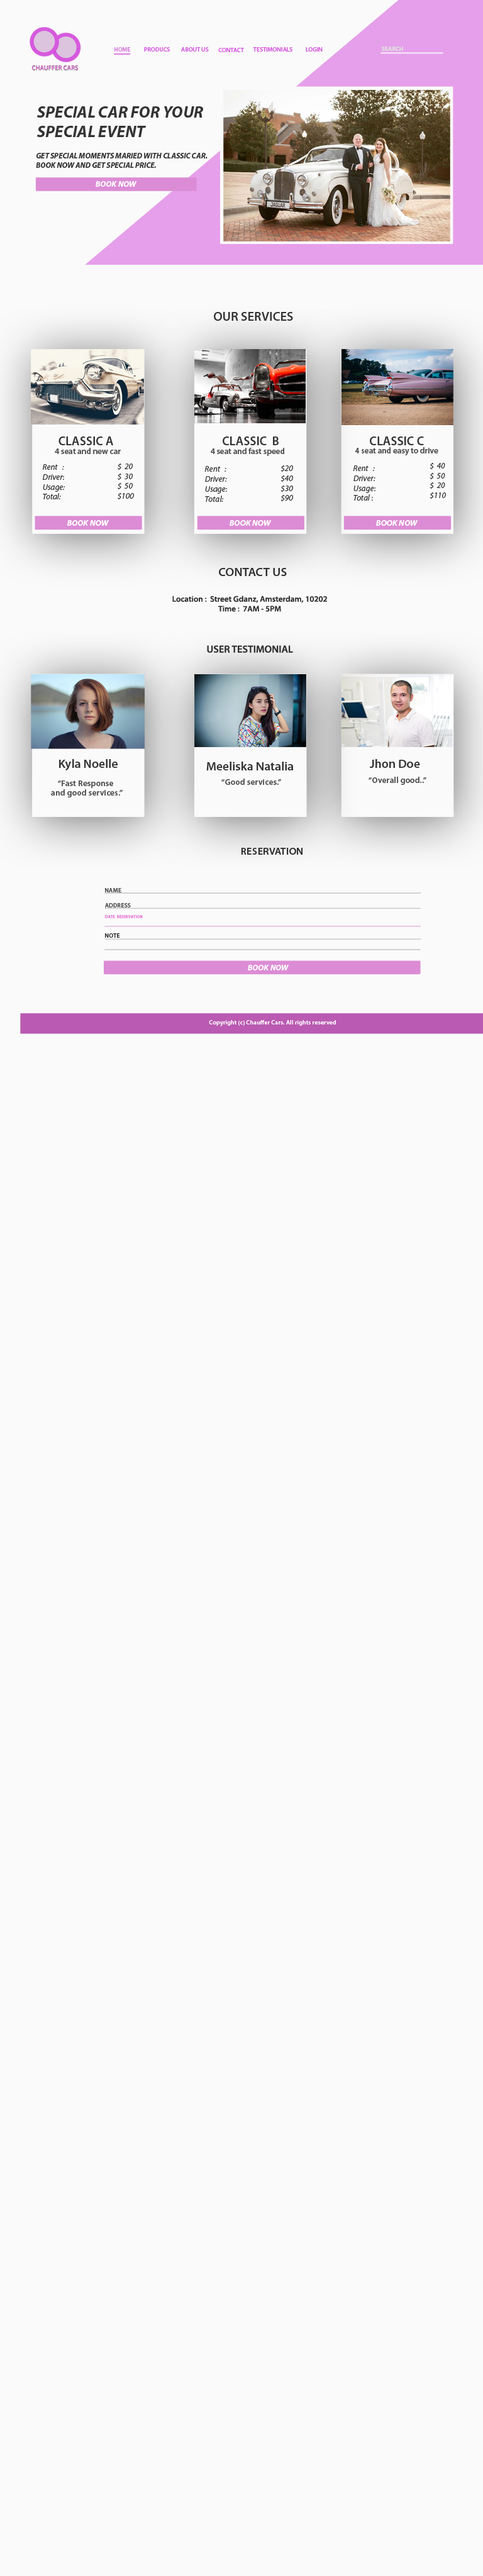
<style>
.page{position:relative;width:483px;height:2576px;background:#fafafa}
.page>*{position:absolute;margin:0}
.t1{font:6.1px "MyriadPro-Semibold";color:#d87cde}
.t2{font:6.1px "MyriadPro-Semibold";color:#d65ade}
.t3{font:6.1px "MyriadPro-Bold";color:#dedede}
.t4{font:16.4px "MyriadPro-BoldIt";color:#333333}
.t5{font:8.2px "MyriadPro-BoldIt";color:#333333;scale:0.94 1}
.t6{font:8.2px "MyriadPro-BoldIt";color:#ffffff}
.t7{font:12.8px "MyriadPro-Semibold";color:#333333}
.t8{font:12.4px "MyriadPro-Semibold";color:#333333}
.t9{font:8.3px "MyriadPro-Semibold";color:#515151}
.t10{font:8.3px "MyriadPro-It";color:#313131}
.t11{font:8.3px "MyriadPro-BoldIt";color:#ffffff}
.t12{font:12.2px "MyriadPro-Semibold";color:#313131}
.t13{font:8.1px "MyriadPro-Semibold";color:#313131}
.t14{font:10.2px "MyriadPro-Semibold";color:#313131}
.t15{font:12.2px "MyriadPro-Semibold";color:#333333}
.t16{font:8.1px "MyriadPro-Semibold";letter-spacing:0.02em;color:#515151}
.t17{font:10.2px "MyriadPro-Semibold";letter-spacing:0.02em;color:#313131}
.t18{font:6.1px "MyriadPro-Semibold";letter-spacing:0.02em;color:#4b4b4b}
.t19{font:4.1px "MyriadPro-Semibold";letter-spacing:0.02em;color:#e67cd6}
.t20{font:6.1px "MyriadPro-Semibold";letter-spacing:0.02em;color:#313131}
.t21{font:8.1px "MyriadPro-BoldIt";color:#ffffff}
.t22{font:6.1px "MyriadPro-Semibold";letter-spacing:0.02em;color:#fcfcfc}
</style>
<div class="page">
<p class="t1" style="left:114px;top:47px;width:17px;height:5px">HOME</p>
<p class="t2" style="left:144px;top:47px;width:26px;height:5px">PRODUCS</p>
<p class="t2" style="left:181px;top:47px;width:28px;height:5px">ABOUT US</p>
<p class="t2" style="left:218px;top:48px;width:26px;height:4px">CONTACT</p>
<p class="t2" style="left:253px;top:47px;width:39px;height:5px">TESTIMONIALS</p>
<p class="t2" style="left:306px;top:47px;width:17px;height:5px">LOGIN</p>
<p class="t3" style="left:382px;top:47px;width:21px;height:4px">SEARCH</p>
<p class="t4" style="left:36px;top:106px;width:167px;height:31px">SPECIAL CAR FOR YOUR <br>SPECIAL EVENT</p>
<p class="t5" style="left:36px;top:153px;width:172px;height:15px">GET SPECIAL MOMENTS MARIED WITH CLASSIC CAR.<br>BOOK NOW AND GET SPECIAL PRICE.</p>
<p class="t6" style="left:96px;top:181px;width:41px;height:6px">BOOK NOW</p>
<p class="t7" style="left:214px;top:312px;width:79px;height:9px">OUR SERVICES</p>
<p class="t8" style="left:58px;top:436px;width:55px;height:9px">CLASSIC A</p>
<p class="t8" style="left:223px;top:436px;width:56px;height:9px">CLASSIC  B</p>
<p class="t8" style="left:370px;top:436px;width:54px;height:9px">CLASSIC C</p>
<p class="t9" style="left:55px;top:448px;width:66px;height:6px">4 seat and new car</p>
<p class="t9" style="left:211px;top:448px;width:73px;height:8px">4 seat and fast speed</p>
<p class="t9" style="left:355px;top:447px;width:83px;height:9px">4 seat and easy to drive</p>
<p class="t10" style="left:42px;top:464px;width:23px;height:35px">Rent   : <br>Driver: <br>Usage: <br>Total:</p>
<p class="t10" style="left:118px;top:463px;width:16px;height:37px">$  20<br>$  30<br>$  50<br>$100</p>
<p class="t10" style="left:204px;top:466px;width:23px;height:36px">Rent   : <br>Driver: <br>Usage: <br>Total:</p>
<p class="t10" style="left:280px;top:465px;width:13px;height:37px">$20<br>$40<br>$30<br>$90</p>
<p class="t10" style="left:353px;top:465px;width:22px;height:36px">Rent   : <br>Driver: <br>Usage: <br>Total :</p>
<p class="t10" style="left:430px;top:462px;width:16px;height:37px">$  40<br>$  50<br>$  20<br>$110</p>
<p class="t11" style="left:67px;top:520px;width:42px;height:6px">BOOK NOW</p>
<p class="t11" style="left:230px;top:520px;width:42px;height:6px">BOOK NOW</p>
<p class="t11" style="left:376px;top:520px;width:42px;height:6px">BOOK NOW</p>
<p class="t12" style="left:219px;top:568px;width:68px;height:8px">CONTACT US</p>
<p class="t13" style="left:172px;top:596px;width:155px;height:16px;text-align:center">Location :  Street Gdanz, Amsterdam, 10202<br>Time :  7AM - 5PM</p>
<p class="t14" style="left:207px;top:645px;width:86px;height:8px">USER TESTIMONIAL</p>
<p class="t15" style="left:59px;top:759px;width:59px;height:11px">Kyla Noelle</p>
<p class="t15" style="left:206px;top:762px;width:87px;height:8px">Meeliska Natalia</p>
<p class="t15" style="left:370px;top:759px;width:50px;height:9px">Jhon Doe</p>
<p class="t16" style="left:51px;top:780px;width:72px;height:17px;text-align:center">“Fast Response <br>and good services.”</p>
<p class="t16" style="left:221px;top:779px;width:60px;height:6px">“Good services.”</p>
<p class="t16" style="left:369px;top:777px;width:57px;height:8px">“Overall good..”</p>
<p class="t17" style="left:241px;top:848px;width:62px;height:7px">RESERVATION</p>
<p class="t18" style="left:105px;top:888px;width:16px;height:4px">NAME</p>
<p class="t18" style="left:105px;top:903px;width:26px;height:5px">ADDRESS</p>
<p class="t19" style="left:105px;top:915px;width:38px;height:3px">DATE  RESERVATION</p>
<p class="t20" style="left:105px;top:933px;width:15px;height:5px">NOTE</p>
<p class="t21" style="left:248px;top:965px;width:41px;height:5px">BOOK NOW</p>
<p class="t22" style="left:209px;top:1020px;width:127px;height:6px">Copyright (c) Chauffer Cars. All rights reserved</p>
</div>
